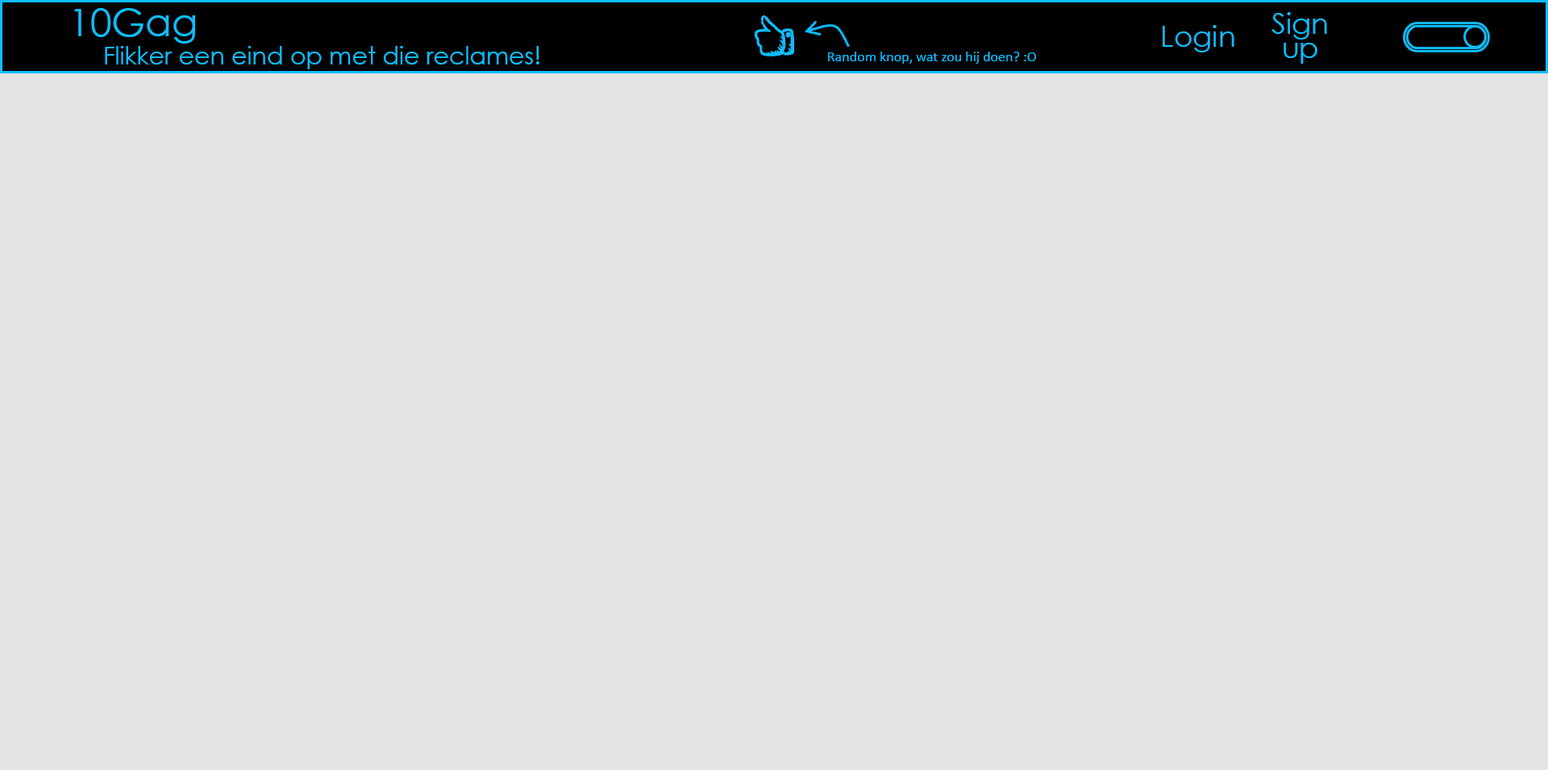
<style>
.page{position:relative;width:1548px;height:770px;background:#e4e4e4}
.page>*{position:absolute;margin:0}
.t1{font:38.7px "CenturyGothic";color:#0dbeff}
.t2{font:29px/24.2px "CenturyGothic";color:#0dbeff}
.t3{font:29px "CenturyGothic";color:#0dbeff}
.t4{font:24.2px "CenturyGothic";color:#0dbeff}
.t5{font:14.5px "Calibri";color:#0dbeff}
</style>
<div class="page">
<p class="t1" style="left:74px;top:8px;width:121px;height:36px">10Gag</p>
<p class="t2" style="left:1272px;top:12px;width:55px;height:52px;text-align:center">Sign<br>up</p>
<p class="t3" style="left:1163px;top:25px;width:72px;height:27px">Login</p>
<p class="t4" style="left:105px;top:46px;width:434px;height:23px">Flikker een eind op met die reclames!</p>
<p class="t5" style="left:828px;top:52px;width:208px;height:12px">Random knop, wat zou hij doen? :O</p>
</div>
